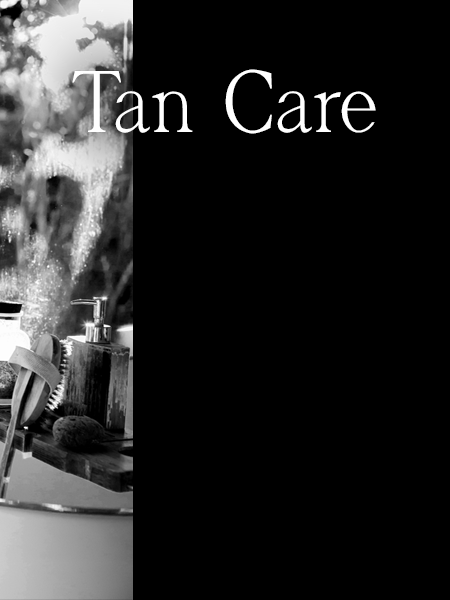
<style>
.page{position:relative;width:450px;height:600px;background:#000000}
.page>*{position:absolute;margin:0}
.t1{font:87.2px "VacationRegular";color:#ffffff}
</style>
<div class="page">
<p class="t1" style="left:72px;top:69px;width:304px;height:65px">Tan Care</p>
</div>
